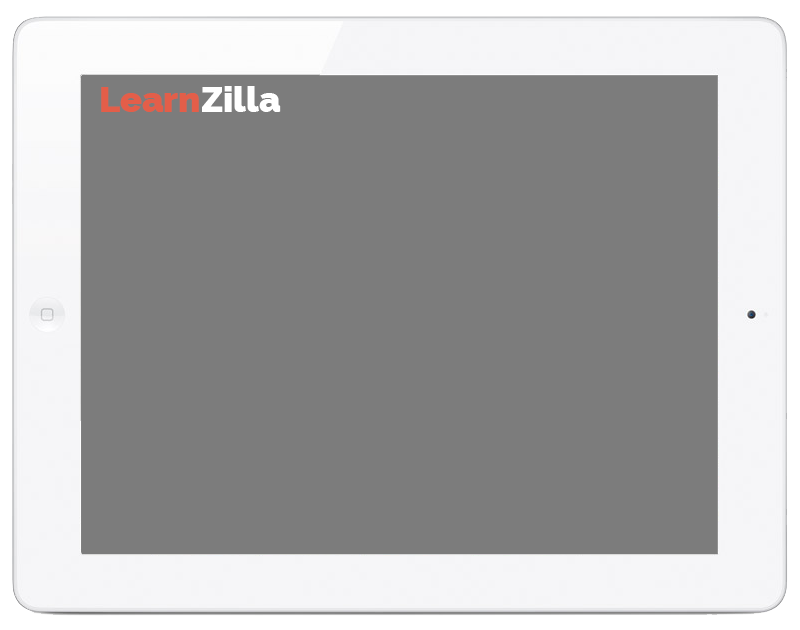
<style>
.page{position:relative;width:800px;height:630px;background:#7c7c7c}
.page>*{position:absolute;margin:0}
.t1{font:36px "Raleway-Heavy";color:#e35e49}
.t2{font:36px "Raleway-Heavy";color:#ffffff}
</style>
<div class="page">
<p class="t1" style="left:101px;top:86px;width:180px;height:26px">Learn<span class="t2">Zilla</span></p>
</div>
